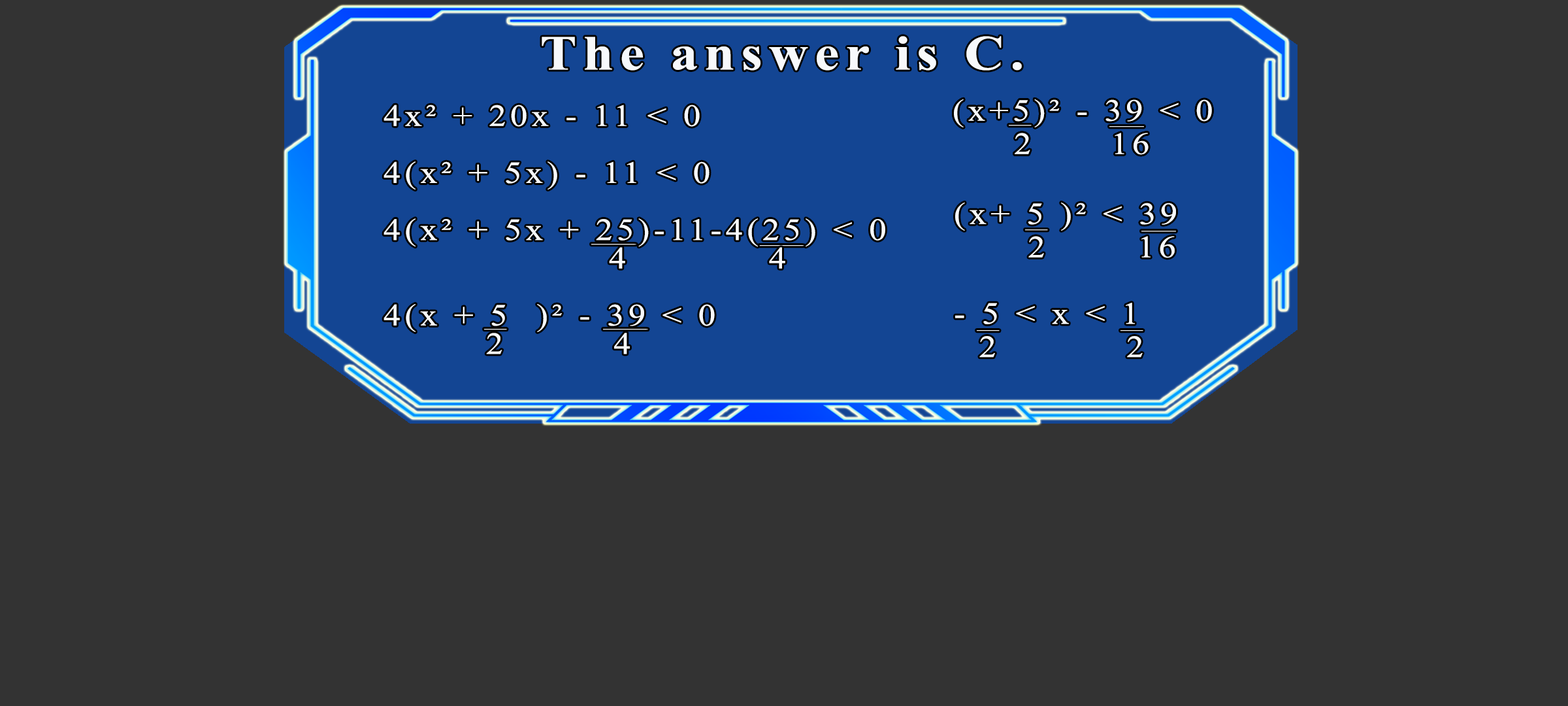
<style>
.page{position:relative;width:1568px;height:706px;background:#333333}
.page>*{position:absolute;margin:0}
.t1{font:49px "TimesNewRomanPS-BoldMT";letter-spacing:0.115em;color:#f7f9fb;scale:1.12 1}
.t2{font:30.9px/33.2px "TimesNewRomanPSMT";letter-spacing:0.115em;color:#f7f9fb;scale:1.12 1}
.t3{font:30.9px/28.5px "TimesNewRomanPSMT";letter-spacing:0.115em;color:#f7f9fb;scale:1.12 1}
</style>
<div class="page">
<p class="t1" style="left:542px;top:36px;width:480px;height:35px">The answer is C.</p>
<p class="t2" style="left:954px;top:99px;width:258px;height:56px">(x+5)² - 39 &lt; 0<br>   2      16</p>
<p class="t2" style="left:954px;top:99px;width:258px;height:56px">(x+5)² - 39 &lt; 0<br>   2      16</p>
<p class="t3" style="left:384px;top:105px;width:501px;height:249px">4x² + 20x - 11 &lt; 0<br><br>4(x² + 5x) - 11 &lt; 0 <br><br>4(x² + 5x + 25)-11-4(25) &lt; 0<br>           4           4<br><br>4(x + 5  )² - 39 &lt; 0<br>     2      4</p>
<p class="t2" style="left:955px;top:202px;width:221px;height:155px">(x+ 5 )² &lt; 39<br>    2       16<br><br>- 5 &lt; x &lt; 1     <br>  2           2</p>
</div>
